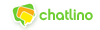
<style>
.page{position:relative;width:100px;height:30px;background:#ffffff}
.page>*{position:absolute;margin:0}
.t1{font:15px "Chalet-NewYorkNineteenSeventy";letter-spacing:-0.025em;color:#70ce34}
</style>
<div class="page">
<p class="t1" style="left:39px;top:8px;width:54px;height:13px">chatlino</p>
</div>
